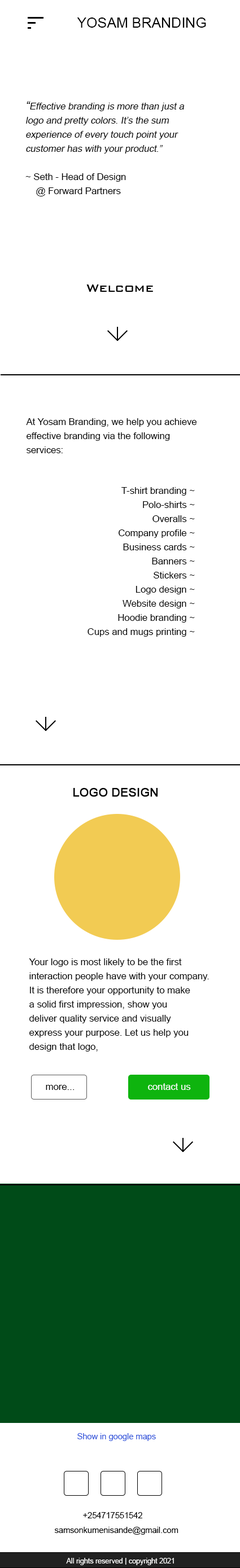
<style>
.page{position:relative;width:240px;height:1568px;background:#ffffff}
.page>*{position:absolute;margin:0}
.t1{font:14.1px "ArialMT";color:#000000}
.t2{font:9.4px/14.1px "ArialMT";color:#000000;font-style:italic}
.t3{font:11.8px/14.1px "ArialMT";color:#000000;font-style:italic}
.t4{font:9.4px/14.1px "ArialMT";color:#000000}
.t5{font:14.1px "BankGothicBT-Medium";color:#000000}
.t6{font:11.8px "ArialMT";color:#000000;font-weight:bold}
.t7{font:9.4px "ArialMT";color:#000000}
.t8{font:9.4px "ArialMT";color:#ffffff}
.t9{font:8.2px "ArialMT";color:#3659dc}
.t10{font:8.2px "ArialMT";color:#000000}
.t11{font:7.1px "ArialMT";color:#fbfbfb}
</style>
<div class="page">
<p class="t1" style="left:77px;top:17px;width:129px;height:11px">YOSAM BRANDING</p>
<p class="t2" style="left:25px;top:101px;width:159px;height:95px"><span class="t3">“</span>Effective branding is more than just a <br>logo and pretty colors. It’s the sum <br>experience of every touch point your <br>customer has with your product.”<br><span class="t4"><br>~ Seth - Head of Design <br>    @ Forward Partners</span></p>
<p class="t5" style="left:86px;top:284px;width:67px;height:8px">Welcome</p>
<p class="t4" style="left:26px;top:418px;width:171px;height:35px">At Yosam Branding, we help you achieve <br>effective branding via the following <br>services:</p>
<p class="t4" style="left:87px;top:487px;width:108px;height:150px;text-align:right">T-shirt branding ~<br>Polo-shirts ~<br>Overalls ~<br>Company profile ~<br>Business cards ~<br>Banners ~<br>Stickers ~<br>Logo design ~<br>Website design ~<br>Hoodie branding ~<br>Cups and mugs printing ~</p>
<p class="t6" style="left:73px;top:788px;width:84px;height:9px">LOGO DESIGN</p>
<p class="t4" style="left:29px;top:958px;width:180px;height:94px">Your logo is most likely to be the first<br>interaction people have with your company. <br>It is therefore your opportunity to make <br>a solid first impression, show you <br>deliver quality service and visually <br>express your purpose. Let us help you<br>design that logo,</p>
<p class="t7" style="left:46px;top:1085px;width:29px;height:5px">more...</p>
<p class="t8" style="left:148px;top:1083px;width:43px;height:7px">contact us</p>
<p class="t9" style="left:77px;top:1433px;width:79px;height:8px">Show in google maps</p>
<p class="t10" style="left:83px;top:1512px;width:59px;height:6px">+254717551542</p>
<p class="t10" style="left:54px;top:1527px;width:124px;height:8px">samsonkumenisande@gmail.com</p>
<p class="t11" style="left:66px;top:1558px;width:108px;height:7px">All rights reserved | copyright 2021</p>
</div>
